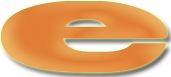
<style>
.page{position:relative;width:171px;height:77px}
.page>*{position:absolute;margin:0}
.t1{font:133.3px "BlackoakStd";color:#e38a40}
.t2{font:242.2px "BlackoakStd";color:#e38a40}
</style>
<div class="page">
<p class="t1" style="left:1px;top:1px;width:166px;height:72px"><span class="t2"> </span>e</p>
</div>
